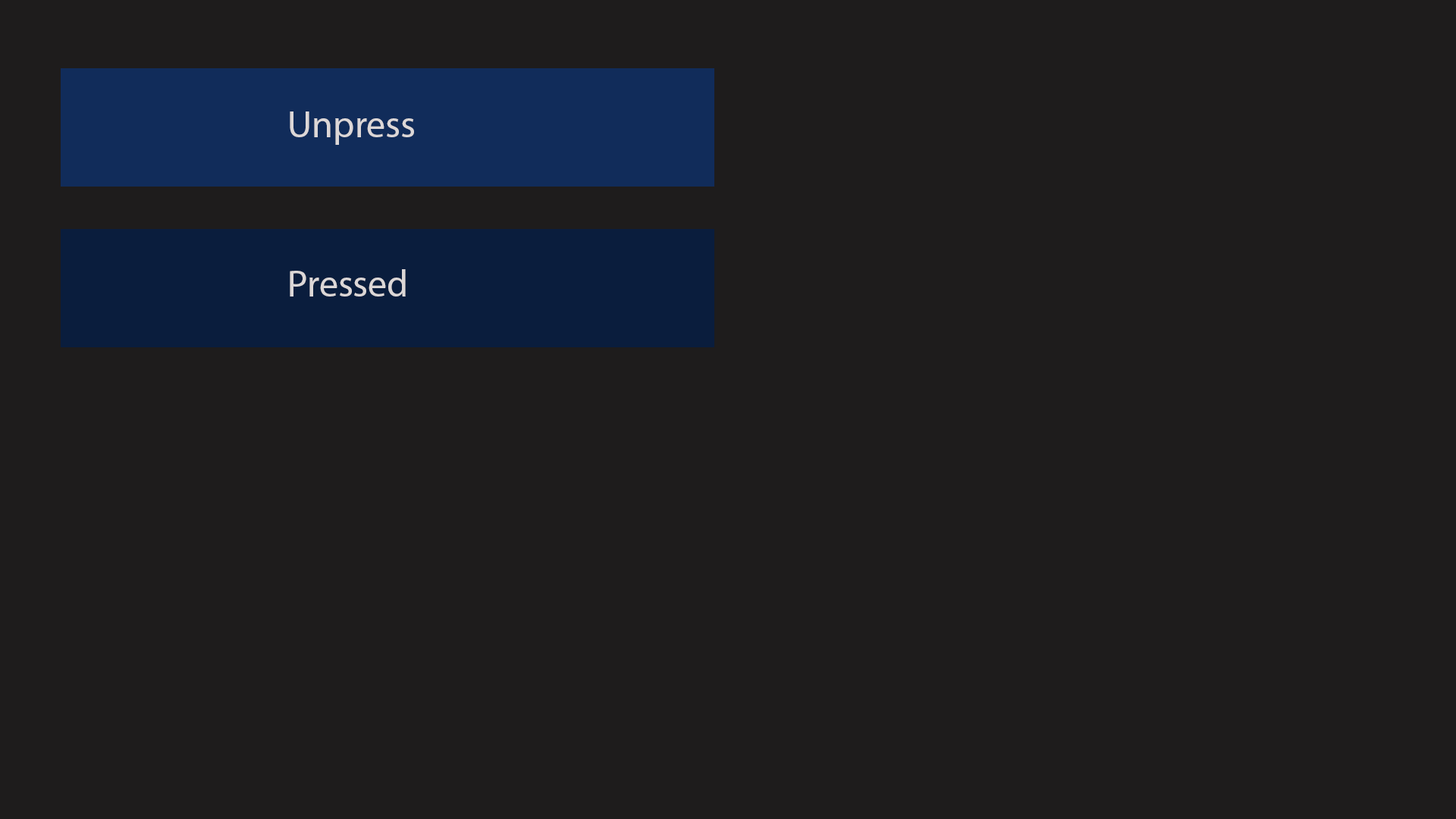
<style>
.page{position:relative;width:1456px;height:819px;background:#1e1c1c}
.page>*{position:absolute;margin:0}
.t1{font:37.9px "MyriadPro-Regular";color:#dcd7d7}
</style>
<div class="page">
<p class="t1" style="left:290px;top:111px;width:124px;height:34px">Unpress</p>
<p class="t1" style="left:290px;top:269px;width:116px;height:28px">Pressed</p>
</div>
